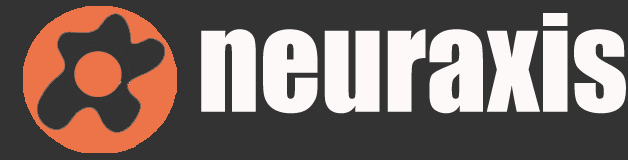
<style>
.page{position:relative;width:628px;height:160px;background:#333333}
.page>*{position:absolute;margin:0}
.t1{font:124.8px "Impact";color:#fcf9f8;scale:0.96 1}
</style>
<div class="page">
<p class="t1" style="left:201px;top:13px;width:425px;height:101px">neuraxis</p>
</div>
